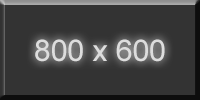
<style>
.page{position:relative;width:200px;height:100px;background:#333333}
.page>*{position:absolute;margin:0}
.t1{font:30px "ArialMT";color:#dddddd}
</style>
<div class="page">
<p class="t1" style="left:35px;top:39px;width:130px;height:23px">800 x 600</p>
</div>
